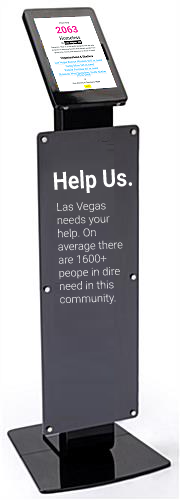
<style>
.page{position:relative;width:180px;height:500px;background:#ffffff}
.page>*{position:absolute;margin:0}
.t1{font:24.5px "Roboto-Bold";color:#ffffff;scale:0.87 1}
.t2{font:11px "Roboto-Light";color:#f5f4f5}
</style>
<div class="page">
<p class="t1" style="left:53px;top:169px;width:79px;height:24px;rotate:-3deg">Help Us.</p>
<p class="t2" style="left:57px;top:202px;width:66px;height:102px;rotate:-2deg">Las Vegas needs your help. On average there are 1600+ peope in dire need in this community.</p>
</div>
